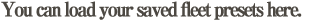
<style>
.page{position:relative;width:312px;height:21px;background:#ffffff}
.page>*{position:absolute;margin:0}
.t1{font:20px "RyuminPro-ExBold";letter-spacing:-0.12em;color:#4c4842;font-weight:bold;scale:0.9 1}
</style>
<div class="page">
<p class="t1" style="left:1px;top:1px;width:301px;height:19px">You can load your saved fleet presets here.</p>
</div>
